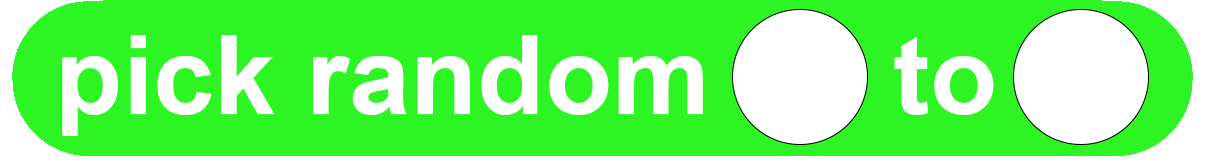
<style>
.page{position:relative;width:1209px;height:162px;background:#2df524}
.page>*{position:absolute;margin:0}
.t1{font:110px "Arial-BoldMT";color:#ffffff}
</style>
<div class="page">
<p class="t1" style="left:62px;top:35px;width:932px;height:101px">pick random      to</p>
</div>
